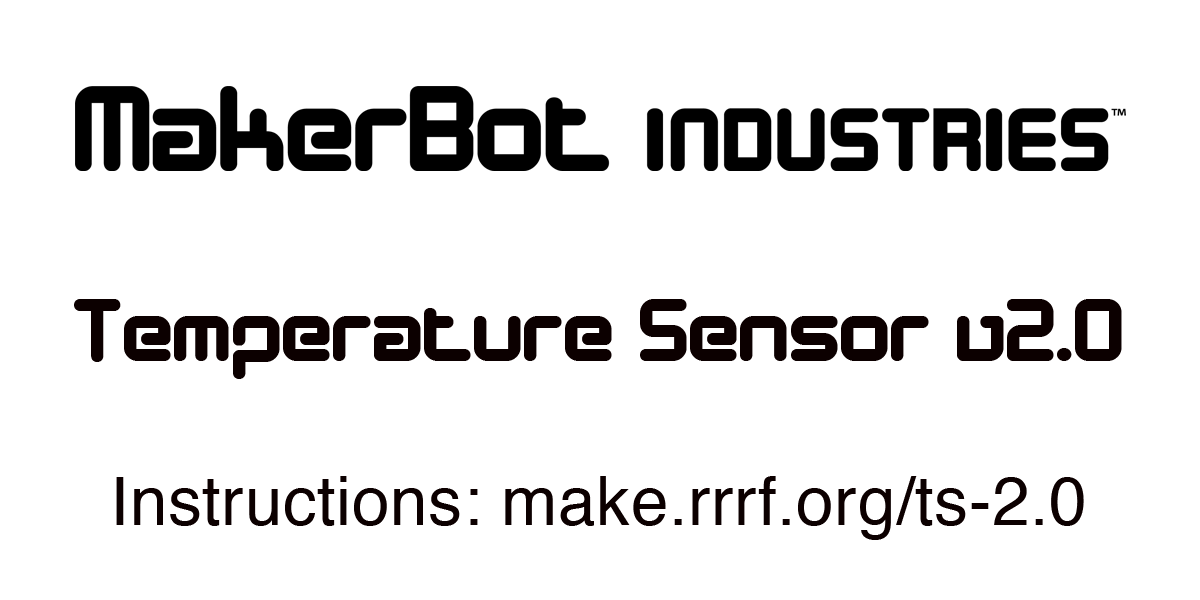
<style>
.page{position:relative;width:1200px;height:600px;background:#ffffff}
.page>*{position:absolute;margin:0}
.t1{font:90.3px "DesignerBlock";letter-spacing:0.01em;color:#0c0000}
.t2{font:67.4px "Helvetica";letter-spacing:0.01em;color:#0c0000}
</style>
<div class="page">
<p class="t1" style="left:74px;top:299px;width:1048px;height:80px">Temperature Sensor v2.0</p>
<p class="t2" style="left:116px;top:476px;width:968px;height:64px">Instructions: make.rrrf.org/ts-2.0</p>
</div>
